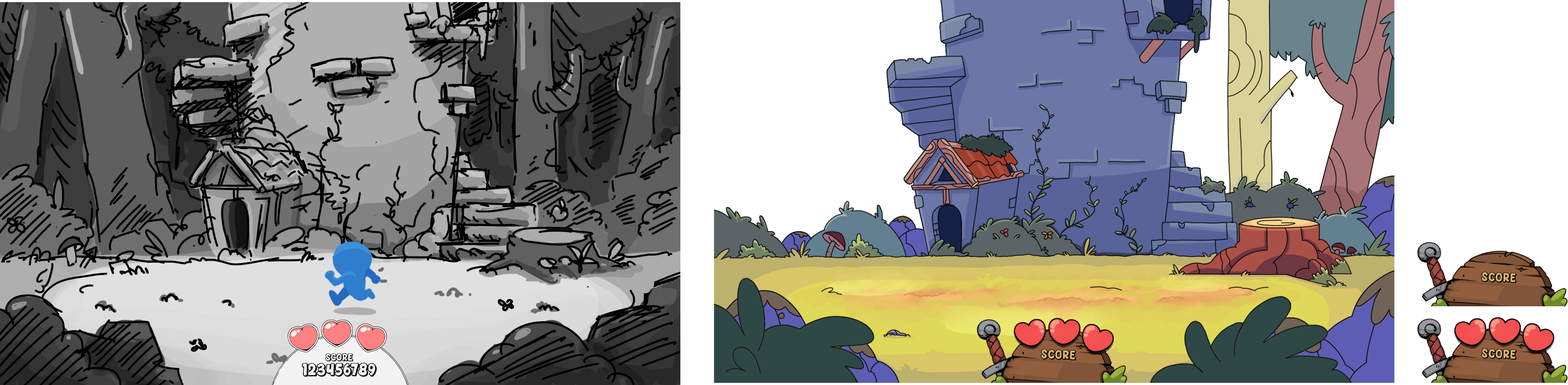
<style>
.page{position:relative;width:1568px;height:385px}
.page>*{position:absolute;margin:0}
.t1{font:12px "This-Cafe";letter-spacing:-0.025em;color:#000000;text-transform:uppercase;font-weight:bold;scale:0.94 1}
.t2{font:9.4px "This-Cafe";letter-spacing:-0.025em;color:#000000;text-transform:uppercase;font-weight:bold;scale:0.94 1}
.t3{font:15.7px "This-Cafe";letter-spacing:-0.025em;color:#000000;text-transform:uppercase;font-weight:bold;scale:0.94 1}
</style>
<div class="page">
<p class="t1" style="left:1481px;top:271px;width:36px;height:12px;rotate:2deg">Score</p>
<p class="t2" style="left:325px;top:353px;width:28px;height:8px">Score</p>
<p class="t1" style="left:1041px;top:349px;width:35px;height:11px;rotate:2deg">Score</p>
<p class="t1" style="left:1481px;top:348px;width:36px;height:12px;rotate:2deg">Score</p>
<p class="t3" style="left:302px;top:363px;width:75px;height:14px">123456789</p>
</div>
